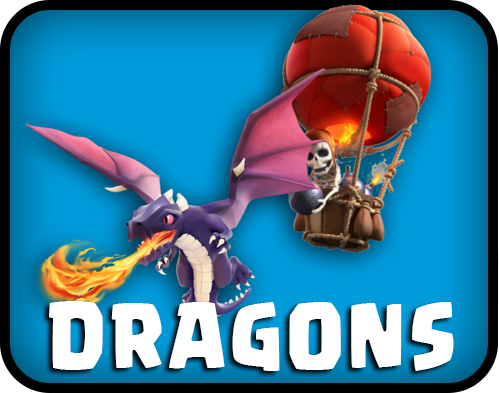
<style>
.page{position:relative;width:499px;height:393px}
.page>*{position:absolute;margin:0}
.t1{font:69.3px "Supercell-Magic";letter-spacing:0.08em;color:#ffffff;scale:0.8 1}
</style>
<div class="page">
<p class="t1" style="left:49px;top:301px;width:405px;height:70px">DRAGONS</p>
</div>
